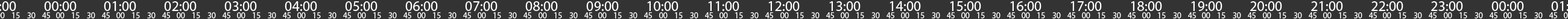
<style>
.page{position:relative;width:1568px;height:19px;background:#333333}
.page>*{position:absolute;margin:0}
.t1{font:14.5px "MyriadPro-Regular";color:#ffffff}
.t2{font:8.4px "MyriadPro-Regular";color:#ffffff}
</style>
<div class="page">
<p class="t1" style="left:44px;top:1px;width:33px;height:10px">00:00</p>
<p class="t1" style="left:104px;top:1px;width:32px;height:10px">01:00</p>
<p class="t1" style="left:164px;top:1px;width:33px;height:10px">02:00</p>
<p class="t1" style="left:224px;top:1px;width:33px;height:10px">03:00</p>
<p class="t1" style="left:285px;top:1px;width:32px;height:10px">04:00</p>
<p class="t1" style="left:345px;top:1px;width:33px;height:10px">05:00</p>
<p class="t1" style="left:405px;top:1px;width:33px;height:10px">06:00</p>
<p class="t1" style="left:465px;top:1px;width:33px;height:10px">07:00</p>
<p class="t1" style="left:525px;top:1px;width:33px;height:10px">08:00</p>
<p class="t1" style="left:586px;top:1px;width:33px;height:10px">09:00</p>
<p class="t1" style="left:647px;top:1px;width:31px;height:10px">10:00</p>
<p class="t1" style="left:708px;top:1px;width:31px;height:10px">11:00</p>
<p class="t1" style="left:768px;top:1px;width:32px;height:10px">12:00</p>
<p class="t1" style="left:829px;top:1px;width:32px;height:10px">13:00</p>
<p class="t1" style="left:890px;top:1px;width:31px;height:10px">14:00</p>
<p class="t1" style="left:950px;top:1px;width:31px;height:10px">15:00</p>
<p class="t1" style="left:1010px;top:1px;width:32px;height:10px">16:00</p>
<p class="t1" style="left:1070px;top:1px;width:32px;height:10px">17:00</p>
<p class="t1" style="left:1131px;top:1px;width:31px;height:10px">18:00</p>
<p class="t1" style="left:1191px;top:1px;width:31px;height:10px">19:00</p>
<p class="t1" style="left:1250px;top:1px;width:32px;height:10px">20:00</p>
<p class="t1" style="left:1311px;top:1px;width:32px;height:10px">21:00</p>
<p class="t1" style="left:1371px;top:1px;width:32px;height:10px">22:00</p>
<p class="t1" style="left:1431px;top:1px;width:32px;height:10px">23:00</p>
<p class="t1" style="left:1491px;top:1px;width:33px;height:10px">00:00</p>
<p class="t2" style="left:56px;top:12px;width:54px;height:6px"><span class="t1">    </span>00    15    30    45</p>
<p class="t2" style="left:116px;top:12px;width:54px;height:6px"><span class="t1">    </span>00    15    30    45</p>
<p class="t2" style="left:177px;top:12px;width:53px;height:6px"><span class="t1">    </span>00    15    30    45</p>
<p class="t2" style="left:237px;top:12px;width:54px;height:6px"><span class="t1">    </span>00    15    30    45</p>
<p class="t2" style="left:297px;top:12px;width:54px;height:6px"><span class="t1">    </span>00    15    30    45</p>
<p class="t2" style="left:358px;top:12px;width:53px;height:6px"><span class="t1">    </span>00    15    30    45</p>
<p class="t2" style="left:417px;top:12px;width:54px;height:6px"><span class="t1">    </span>00    15    30    45</p>
<p class="t2" style="left:478px;top:12px;width:53px;height:6px"><span class="t1">    </span>00    15    30    45</p>
<p class="t2" style="left:539px;top:12px;width:53px;height:6px"><span class="t1">    </span>00    15    30    45</p>
<p class="t2" style="left:598px;top:12px;width:54px;height:6px"><span class="t1">    </span>00    15    30    45</p>
<p class="t2" style="left:659px;top:12px;width:54px;height:6px"><span class="t1">    </span>00    15    30    45</p>
<p class="t2" style="left:719px;top:12px;width:54px;height:6px"><span class="t1">    </span>00    15    30    45</p>
<p class="t2" style="left:780px;top:12px;width:54px;height:6px"><span class="t1">    </span>00    15    30    45</p>
<p class="t2" style="left:841px;top:12px;width:53px;height:6px"><span class="t1">    </span>00    15    30    45</p>
<p class="t2" style="left:901px;top:12px;width:54px;height:6px"><span class="t1">    </span>00    15    30    45</p>
<p class="t2" style="left:961px;top:12px;width:54px;height:6px"><span class="t1">    </span>00    15    30    45</p>
<p class="t2" style="left:1022px;top:12px;width:53px;height:6px"><span class="t1">    </span>00    15    30    45</p>
<p class="t2" style="left:1082px;top:12px;width:54px;height:6px"><span class="t1">    </span>00    15    30    45</p>
<p class="t2" style="left:1142px;top:12px;width:54px;height:6px"><span class="t1">    </span>00    15    30    45</p>
<p class="t2" style="left:1202px;top:12px;width:54px;height:6px"><span class="t1">    </span>00    15    30    45</p>
<p class="t2" style="left:1263px;top:12px;width:54px;height:6px"><span class="t1">    </span>00    15    30    45</p>
<p class="t2" style="left:1323px;top:12px;width:54px;height:6px"><span class="t1">    </span>00    15    30    45</p>
<p class="t2" style="left:1383px;top:12px;width:54px;height:6px"><span class="t1">    </span>00    15    30    45</p>
<p class="t2" style="left:1444px;top:12px;width:53px;height:6px"><span class="t1">    </span>00    15    30    45</p>
<p class="t2" style="left:1503px;top:12px;width:54px;height:6px"><span class="t1">    </span>00    15    30    45</p>
</div>
